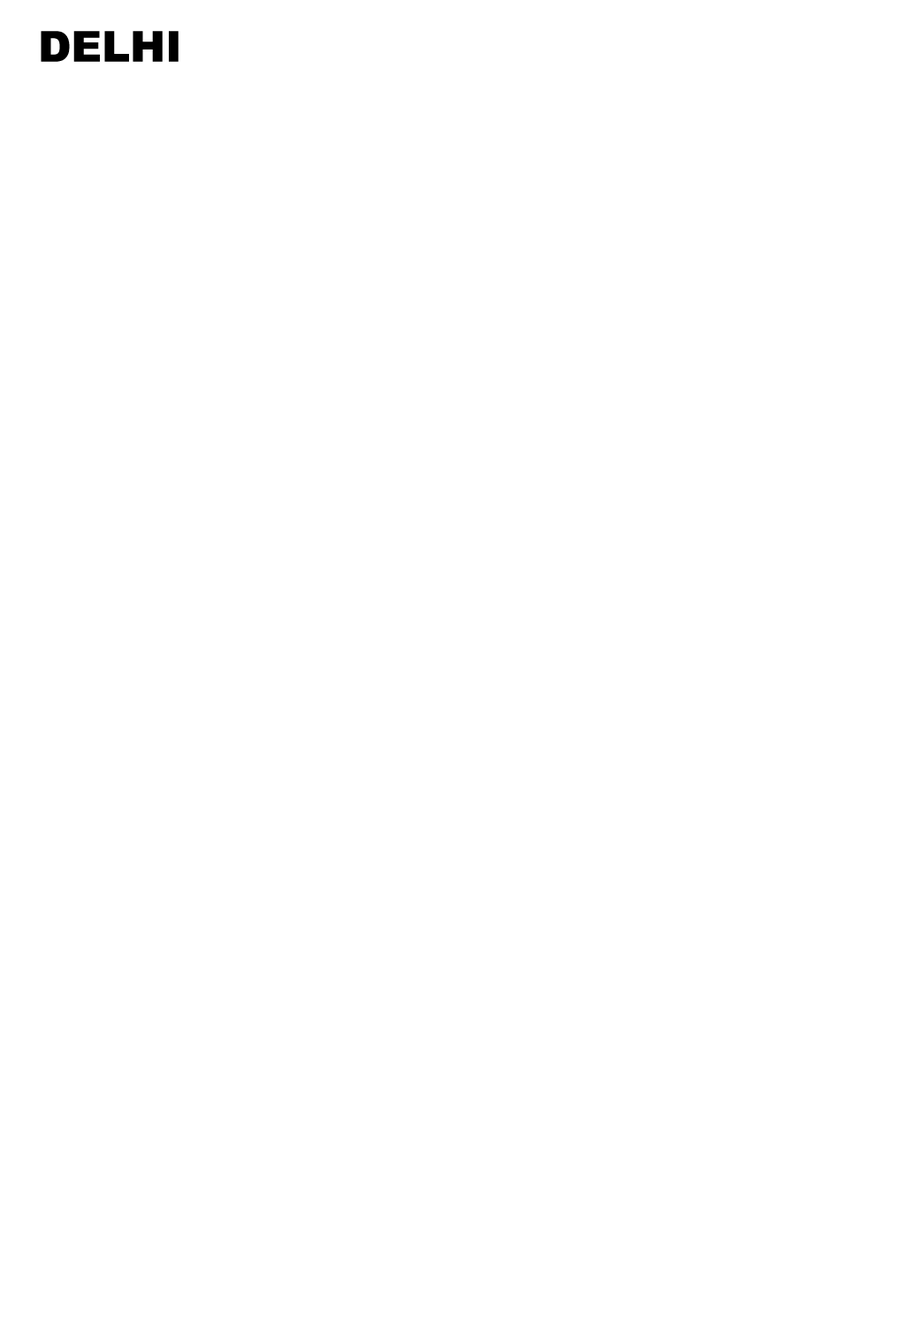
<style>
.page{position:relative;width:905px;height:1318px;background:#ffffff}
.page>*{position:absolute;margin:0}
.t1{font:42.4px "Arial-Black";color:#000000}
</style>
<div class="page">
<p class="t1" style="left:41px;top:31px;width:137px;height:31px">DELHI</p>
</div>
